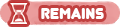
<style>
.page{position:relative;width:120px;height:27px;background:#ffffff}
.page>*{position:absolute;margin:0}
.t1{font:18px "Junegull";color:#ffffff}
</style>
<div class="page">
<p class="t1" style="left:41px;top:8px;width:63px;height:11px">REMAINS</p>
</div>
